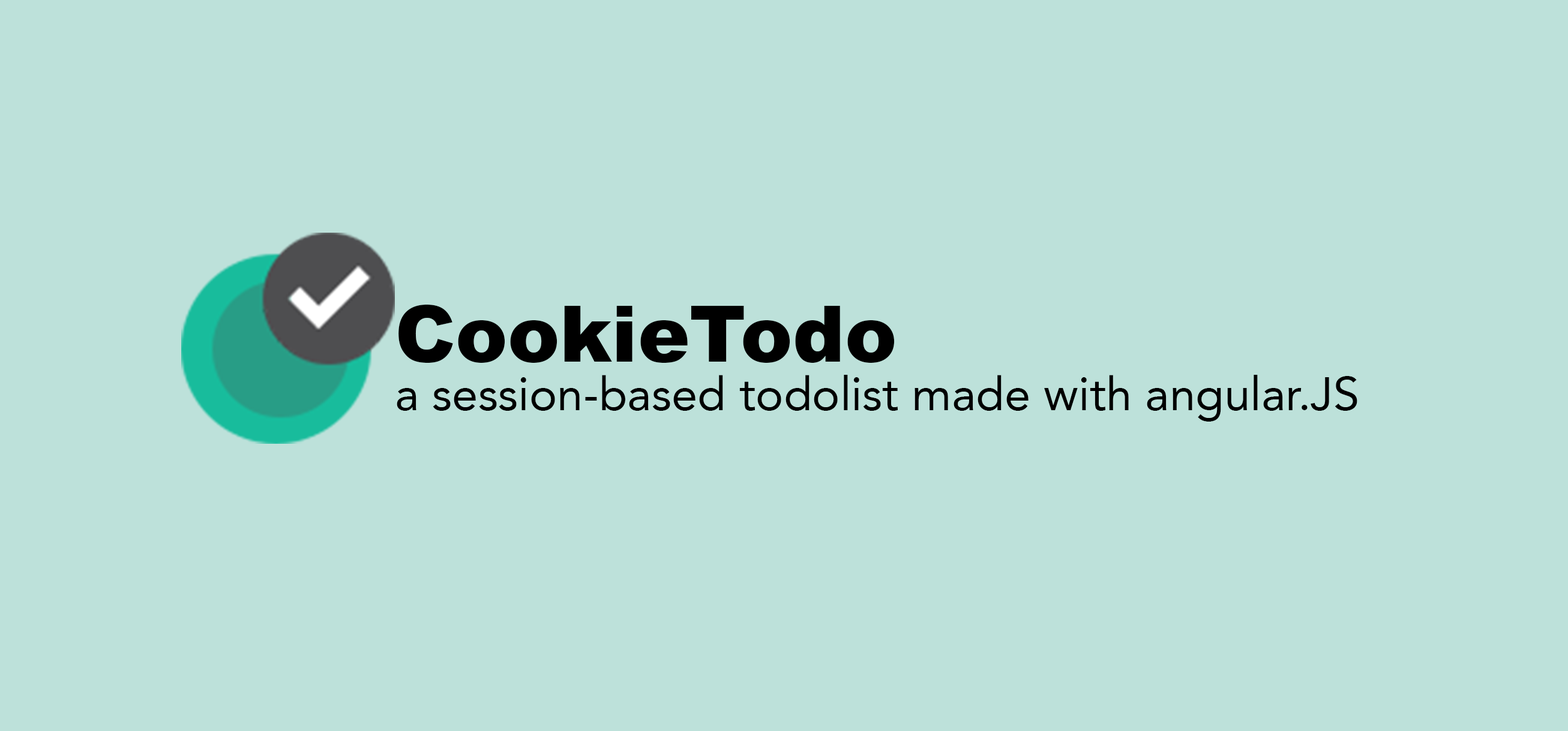
<style>
.page{position:relative;width:1568px;height:731px;background:#bde1da}
.page>*{position:absolute;margin:0}
.t1{font:78px "Arial-Black";color:#000000}
.t2{font:46.8px "Avenir-Roman";color:#000000}
</style>
<div class="page">
<p class="t1" style="left:398px;top:305px;width:497px;height:58px">CookieTodo</p>
<p class="t2" style="left:397px;top:375px;width:960px;height:47px">a session-based todolist made with angular.JS</p>
</div>
